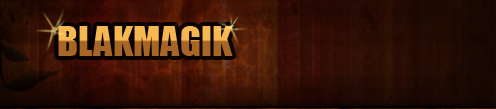
<style>
.page{position:relative;width:496px;height:109px}
.page>*{position:absolute;margin:0}
.t1{font:38px "Impact";text-transform:uppercase}
</style>
<div class="page">
<p class="t1" style="left:58px;top:26px;width:175px;height:30px">BLAKMAGIK</p>
</div>
